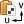
<style>
.page{position:relative;width:24px;height:24px;background:#ffffff}
.page>*{position:absolute;margin:0}
.t1{font:8px "MyriadPro-Semibold";letter-spacing:0.5em;color:#000000}
</style>
<div class="page">
<p class="t1" style="left:18px;top:2px;width:6px;height:7px">V</p>
<p class="t1" style="left:5px;top:17px;width:5px;height:7px">U</p>
</div>
